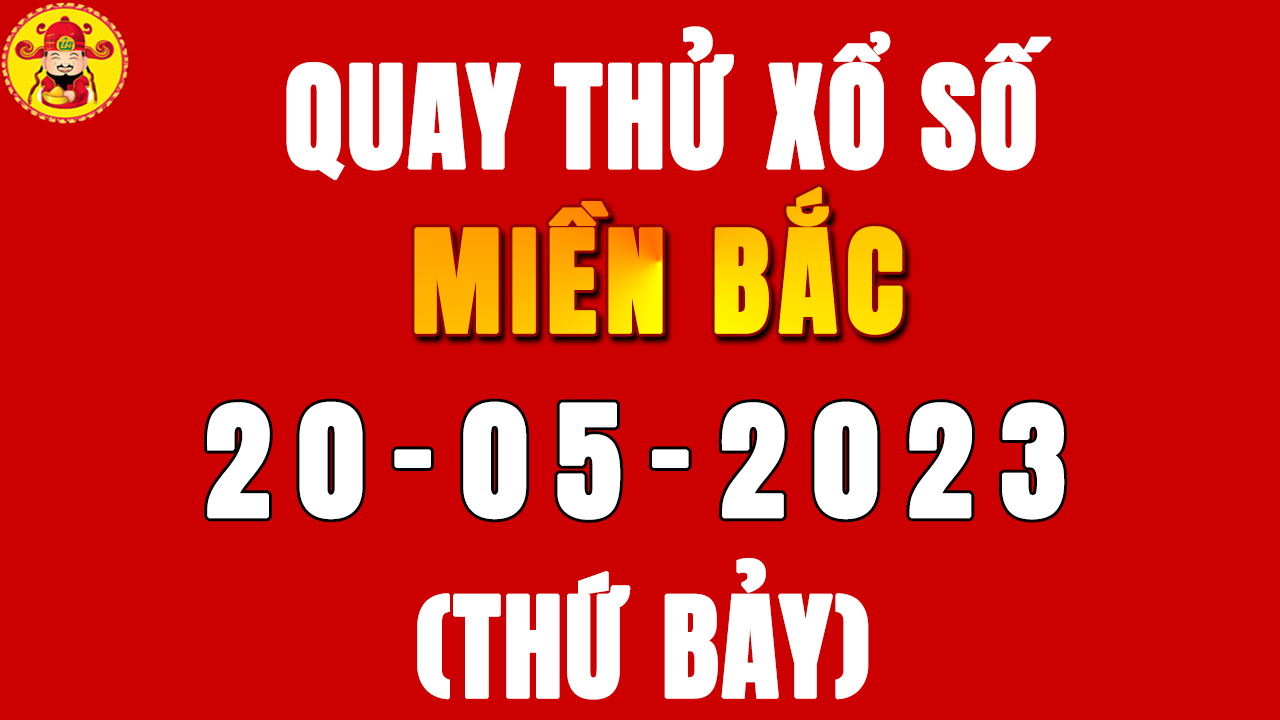
<style>
.page{position:relative;width:1280px;height:720px;background:#cc0000}
.page>*{position:absolute;margin:0}
.t1{font:120px "Anton-Regular";color:#ffffff;text-transform:uppercase;font-weight:bold}
.t2{font:120px "Anton-Regular";letter-spacing:0.05em;text-transform:uppercase;font-weight:bold}
.t3{font:130px "Anton-Regular";letter-spacing:0.2em;color:#ffffff;text-transform:uppercase;font-weight:bold}
.t4{font:118px "Anton-Regular";color:#ffffff;text-transform:uppercase;font-weight:bold}
</style>
<div class="page">
<p class="t1" style="left:286px;top:26px;width:766px;height:155px">Quay thử xổ số</p>
<p class="t2" style="left:414px;top:186px;width:489px;height:149px">miền bắc</p>
<p class="t3" style="left:207px;top:401px;width:858px;height:119px">20-05-2023</p>
<p class="t4" style="left:417px;top:558px;width:452px;height:142px">(thứ bảy)</p>
</div>
